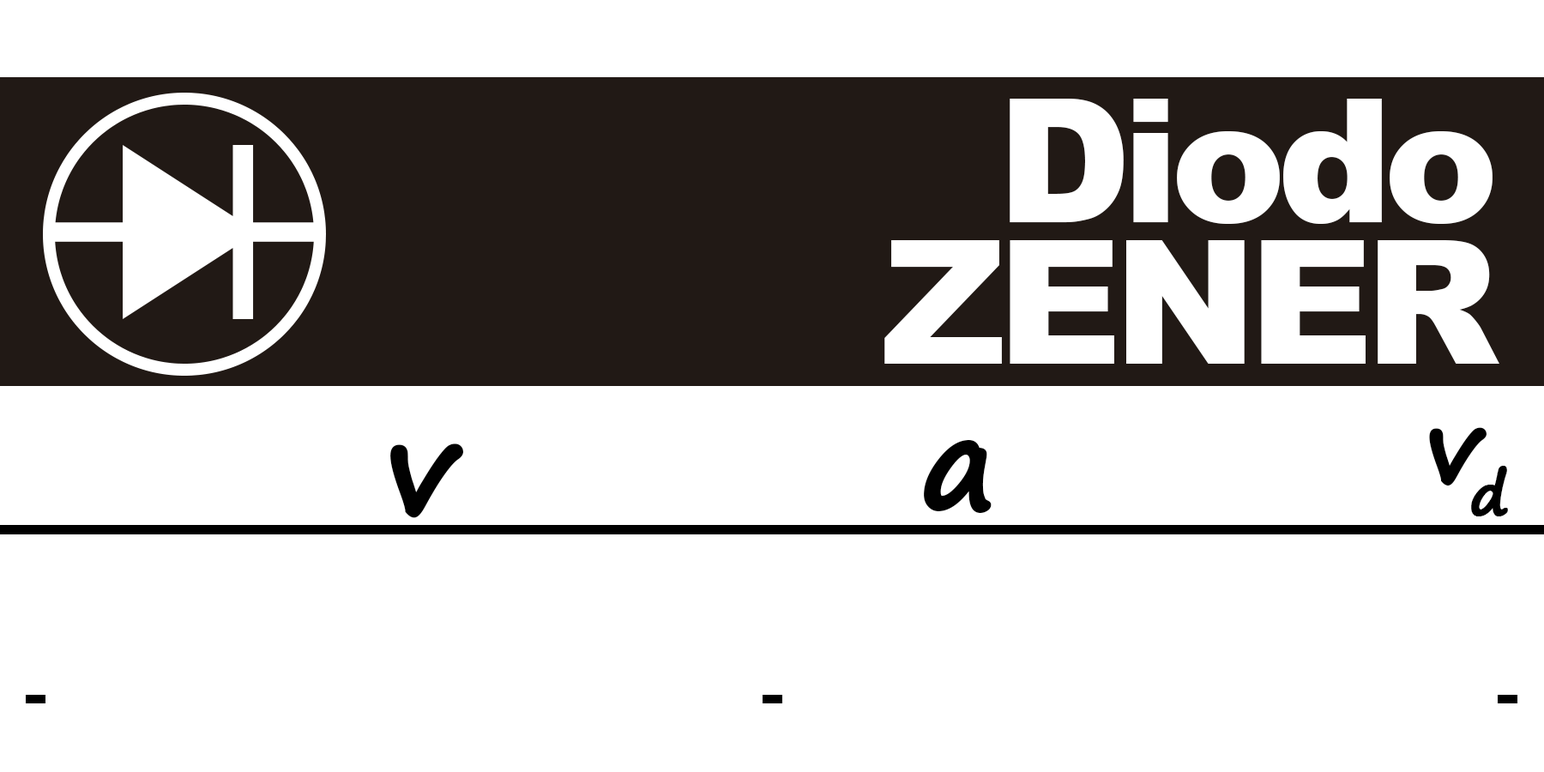
<style>
.page{position:relative;width:1544px;height:772px;background:#ffffff}
.page>*{position:absolute;margin:0}
.t1{font:172.5px/141.6px "Arial-Black";letter-spacing:-0.05em;color:#ffffff}
.t2{font:99.9px "SegoePrint-Bold";letter-spacing:-0.15em;color:#010101;font-weight:bold}
.t3{font:127.1px "Arial-BoldMT";letter-spacing:-0.15em;color:#010101}
.t4{font:127.1px "SegoePrint-Bold";letter-spacing:-0.01em;color:#010101;font-weight:bold}
.t5{font:127.1px "Arial-BoldMT";letter-spacing:-0.01em;color:#010101}
</style>
<div class="page">
<p class="t1" style="left:885px;top:99px;width:615px;height:265px;text-align:right">Diodo<br>ZENER</p>
<p class="t2" style="left:1429px;top:427px;width:79px;height:89px"><span class="t3"> </span>vd</p>
<p class="t4" style="left:390px;top:444px;width:74px;height:74px">v</p>
<p class="t4" style="left:924px;top:439px;width:68px;height:75px"><span class="t5">   </span>a</p>
</div>
